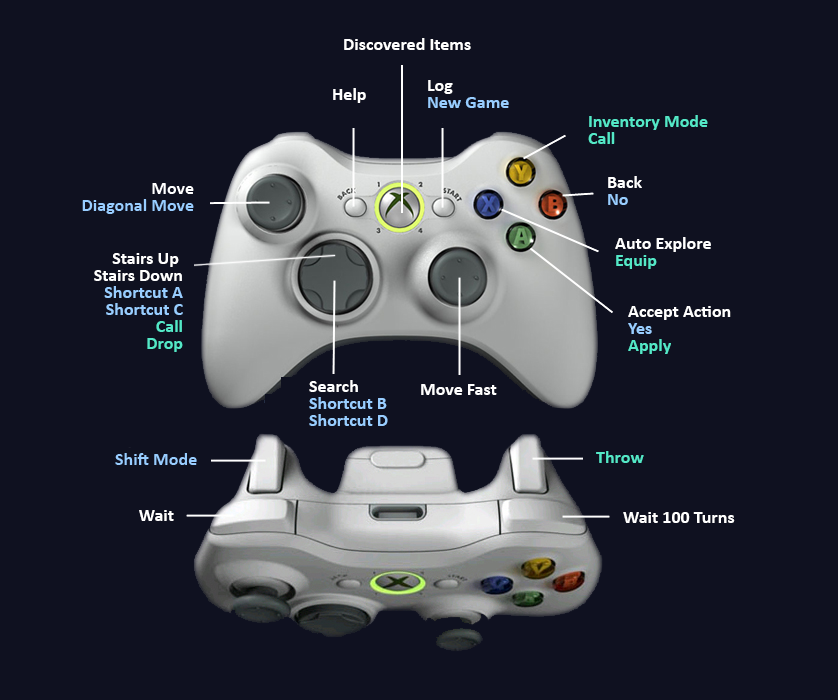
<style>
.page{position:relative;width:838px;height:700px;background:#0f1120}
.page>*{position:absolute;margin:0}
.t1{font:18px "Calibri-Bold";color:#ffffff}
.t2{font:18px/17px "Calibri-Bold";color:#98cdff}
.t3{font:18px/17px "Calibri-Bold";color:#ffffff}
.t4{font:18px/17px "Calibri-Bold";color:#54e8c7}
.t5{font:18px "Calibri-Bold";color:#98cdff}
.t6{font:18px "Calibri-Bold";color:#54e8c7}
</style>
<div class="page">
<p class="t1" style="left:344px;top:38px;width:127px;height:12px">Discovered Items</p>
<p class="t1" style="left:333px;top:88px;width:33px;height:15px">Help</p>
<p class="t2" style="left:428px;top:80px;width:81px;height:28px"><span class="t3">Log<br></span>New Game</p>
<p class="t4" style="left:588px;top:115px;width:120px;height:29px">Inventory Mode<br>Call</p>
<p class="t2" style="left:82px;top:183px;width:112px;height:31px;text-align:right"><span class="t3">Move<br></span>Diagonal Move</p>
<p class="t3" style="left:608px;top:176px;width:34px;height:29px">Back<br><span class="t2">No</span></p>
<p class="t3" style="left:615px;top:237px;width:96px;height:32px">Auto Explore<br><span class="t4">Equip</span></p>
<p class="t3" style="left:94px;top:253px;width:89px;height:99px;text-align:right">Stairs Up <br>Stairs Down<br><span class="t2">Shortcut A<br>Shortcut C<br></span><span class="t4">Call<br>Drop</span></p>
<p class="t3" style="left:628px;top:306px;width:103px;height:48px">Accept Action<br><span class="t2">Yes<br></span><span class="t4">Apply</span></p>
<p class="t2" style="left:309px;top:380px;width:79px;height:46px"><span class="t3">Search<br></span>Shortcut B<br>Shortcut D</p>
<p class="t1" style="left:421px;top:384px;width:76px;height:11px">Move Fast</p>
<p class="t5" style="left:115px;top:453px;width:82px;height:12px"><span class="t1"><br></span>Shift Mode</p>
<p class="t6" style="left:596px;top:451px;width:48px;height:12px">Throw</p>
<p class="t1" style="left:139px;top:510px;width:35px;height:11px">Wait</p>
<p class="t1" style="left:623px;top:512px;width:112px;height:11px">Wait 100 Turns</p>
</div>
